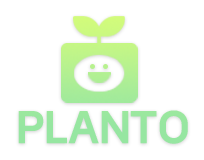
<style>
.page{position:relative;width:204px;height:160px;background:#ffffff}
.page>*{position:absolute;margin:0}
.t1{font:39.2px "NanumSquareNeoTTF-eHv";color:#96e6a1}
</style>
<div class="page">
<p class="t1" style="left:18px;top:110px;width:170px;height:34px">PLANTO</p>
</div>
